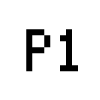
<style>
.page{position:relative;width:100px;height:100px;background:#ffffff}
.page>*{position:absolute;margin:0}
.t1{font:96px "Thintel";letter-spacing:0.04em;color:#000000}
</style>
<div class="page">
<p class="t1" style="left:26px;top:29px;width:52px;height:43px">P1</p>
</div>
